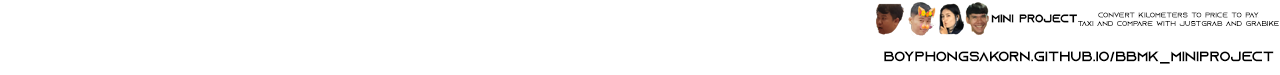
<style>
.page{position:relative;width:1280px;height:75px;background:#ffffff}
.page>*{position:absolute;margin:0}
.t1{font:7px "AzonixRegular";color:#000000}
.t2{font:14px "AzonixRegular";color:#000000}
</style>
<div class="page">
<p class="t1" style="left:1078px;top:12px;width:201px;height:14px;text-align:center">convert kilometers to price to pay<br>taxi and compare with justgrab and grabike</p>
<p class="t2" style="left:884px;top:51px;width:390px;height:13px">boyphongsakorn.github.io/bbmk_miniproject</p>
</div>
